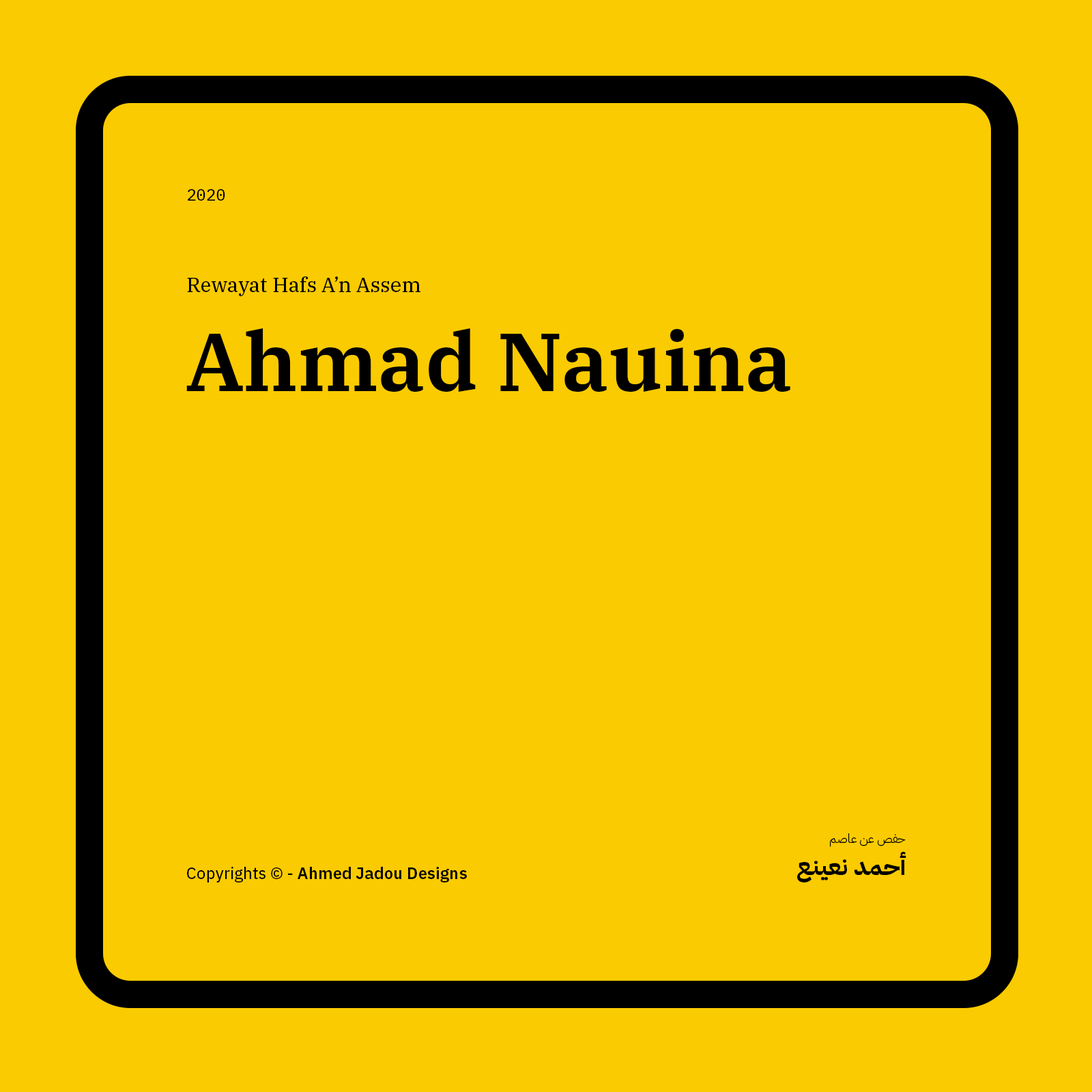
<style>
.page{position:relative;width:1092px;height:1092px;background:#facb00}
.page>*{position:absolute;margin:0}
.t1{font:16.4px "IBMPlexMono-Text";color:#000000}
.t2{font:20.5px "IBMPlexSerif-Text";color:#000000}
.t3{font:81.9px "IBMPlexSerif-SemiBold";color:#000000}
.t4{font:12.3px "IBMPlexArabic-Light";color:#000000}
.t5{font:24.6px "IBMPlexArabic-Bold";color:#000000}
.t6{font:16.4px "IBMPlexSans-SemiBold";color:#000000}
.t7{font:16.4px "IBMPlexSans-Text";color:#000000}
</style>
<div class="page">
<p class="t1" style="left:188px;top:189px;width:37px;height:12px">2020</p>
<p class="t2" style="left:187px;top:276px;width:233px;height:20px">Rewayat Hafs A’n Assem</p>
<p class="t3" style="left:186px;top:328px;width:604px;height:64px">Ahmad Nauina</p>
<p class="t4" style="left:830px;top:833px;width:76px;height:14px">حفص عن عاصم</p>
<p class="t5" style="left:797px;top:852px;width:109px;height:30px">أحمد نعينع</p>
<p class="t6" style="left:187px;top:867px;width:280px;height:15px"><span class="t7">Copyrights © - </span>Ahmed Jadou Designs</p>
</div>
